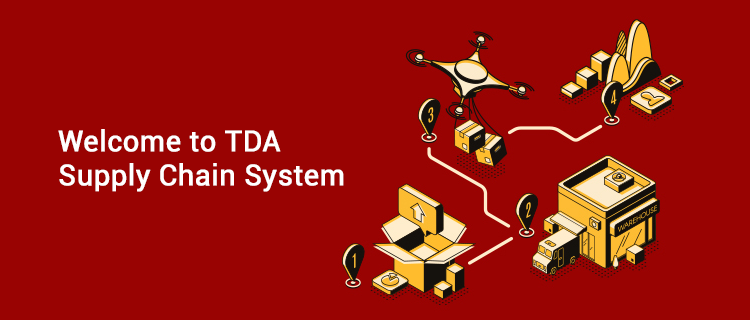
<style>
.page{position:relative;width:750px;height:320px;background:#990302}
.page>*{position:absolute;margin:0}
.t1{font:28.6px/34.2px "Roboto-Regular";color:#ffffff;font-weight:bold}
</style>
<div class="page">
<p class="t1" style="left:58px;top:129px;width:286px;height:63px">Welcome to TDA<br>Supply Chain System</p>
</div>
